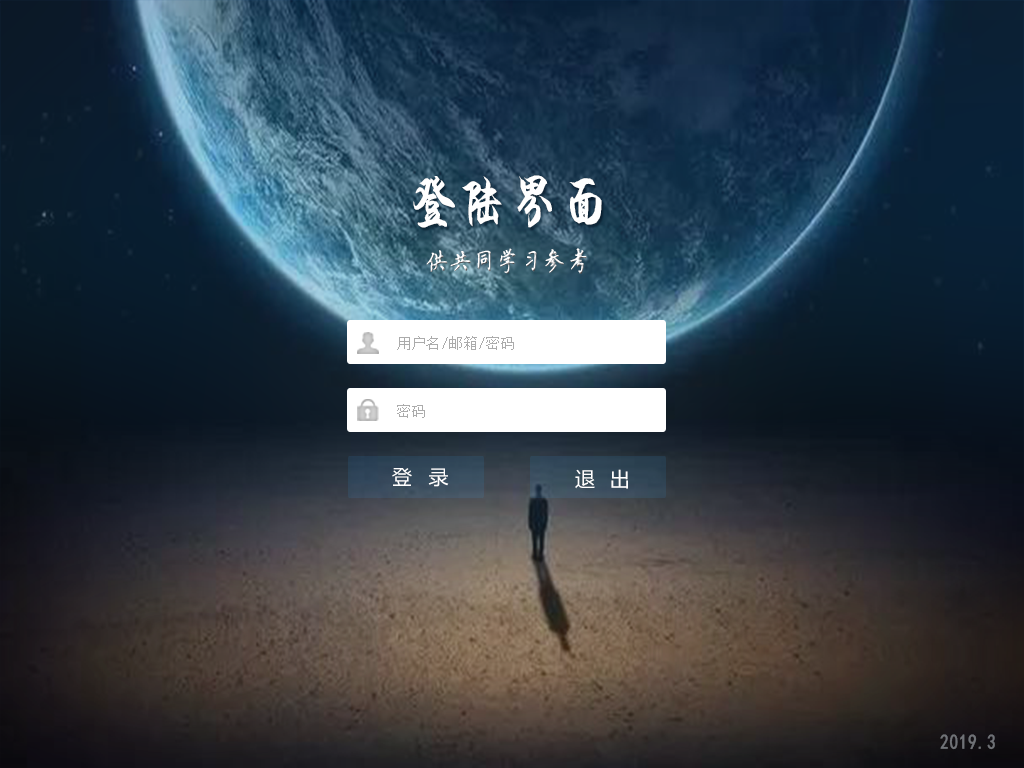
<style>
.page{position:relative;width:1024px;height:768px}
.page>*{position:absolute;margin:0}
.t1{font:61px "HYi4gj";letter-spacing:0.04em;color:#ffffff;scale:0.8 1}
.t2{font:27.7px "QXyingbikai";letter-spacing:0.04em;color:#ffffff;font-weight:bold;scale:0.8 1}
.t3{font:14px "SimSun";letter-spacing:0.05em;color:#ababab}
.t4{font:20px "MicrosoftYaHei";letter-spacing:0.05em;color:#ffffff}
.t5{font:20.7px "SimHei";letter-spacing:0.04em;color:#6f7277;font-weight:bold;scale:0.8 1}
</style>
<div class="page">
<p class="t1" style="left:413px;top:175px;width:189px;height:53px">登陆界面</p>
<p class="t2" style="left:426px;top:248px;width:161px;height:26px">供共同学习参考</p>
<p class="t3" style="left:397px;top:336px;width:117px;height:14px">用户名/邮箱/密码</p>
<p class="t3" style="left:397px;top:404px;width:28px;height:14px">密码</p>
<p class="t4" style="left:392px;top:468px;width:57px;height:19px">登  录</p>
<p class="t4" style="left:575px;top:469px;width:53px;height:20px">退  出</p>
<p class="t5" style="left:940px;top:734px;width:55px;height:16px">2019.3</p>
</div>
